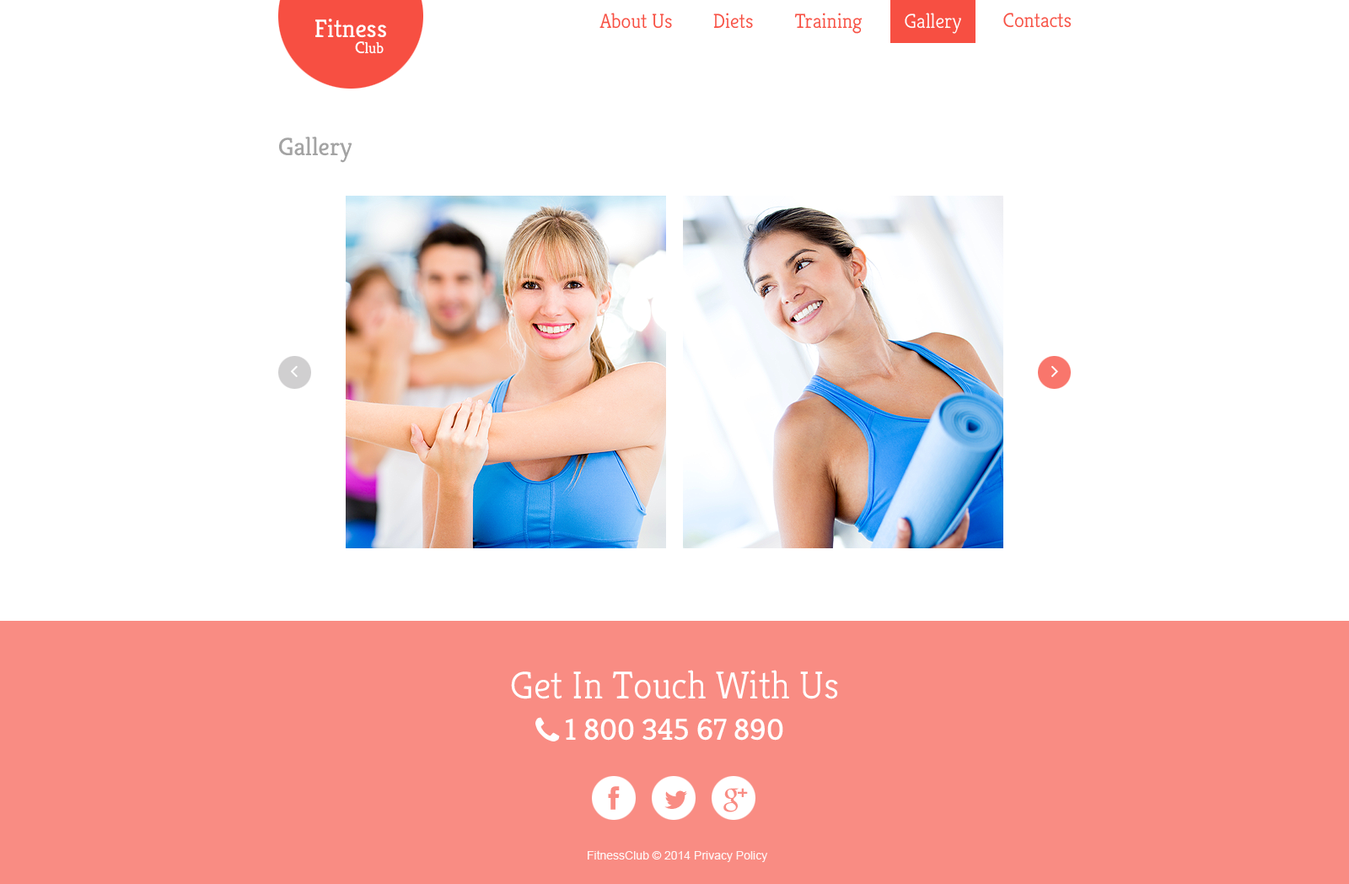
<style>
.page{position:relative;width:1349px;height:884px;background:#ffffff}
.page>*{position:absolute;margin:0}
.t1{font:20.2px "Kreon-Light";color:#f74f42}
.t2{font:20.2px "Kreon-Light";color:#ffffff}
.t3{font:25.3px "Kreon-Regular";color:#ffffff}
.t4{font:15.2px "Kreon-Regular";color:#ffffff}
.t5{font:16.9px "Kreon-Regular";color:#ffffff}
.t6{font:25.3px "Kreon-Regular";color:#a3a3a3}
.t7{font:38.8px "Kreon-Light";color:#ffffff}
.t8{font:30.4px "Kreon-Regular";color:#ffffff}
.t9{font:11.8px "ArialMT";color:#ffffff}
.t10{font:17.7px "ArialMT";color:#ffffff}
</style>
<div class="page">
<p class="t1" style="left:600px;top:13px;width:72px;height:16px">About Us</p>
<p class="t1" style="left:713px;top:13px;width:40px;height:16px">Diets</p>
<p class="t1" style="left:794px;top:13px;width:69px;height:21px">Training</p>
<p class="t2" style="left:905px;top:13px;width:56px;height:21px">Gallery</p>
<p class="t1" style="left:1004px;top:13px;width:68px;height:15px">Contacts</p>
<p class="t3" style="left:315px;top:19px;width:72px;height:19px">Fitness</p>
<p class="t4" style="left:355px;top:41px;width:29px;height:13px"><span class="t5">C</span>lub</p>
<p class="t6" style="left:279px;top:137px;width:73px;height:26px">Gallery</p>
<p class="t7" style="left:511px;top:670px;width:327px;height:29px">Get In Touch With Us</p>
<p class="t8" style="left:566px;top:718px;width:217px;height:22px">1 800 345 67 890</p>
<p class="t9" style="left:588px;top:850px;width:180px;height:12px;opacity:0.9"><span class="t10"><br></span>FitnessClub © 2014 Privacy Policy</p>
</div>
